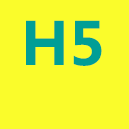
<style>
.page{position:relative;width:129px;height:129px;background:#fafc2b}
.page>*{position:absolute;margin:0}
.t1{font:58.3px "MicrosoftYaHei-Bold";color:#009e96}
</style>
<div class="page">
<p class="t1" style="left:26px;top:20px;width:76px;height:46px">H5</p>
</div>
